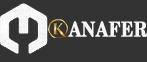
<style>
.page{position:relative;width:147px;height:62px;background:#333333}
.page>*{position:absolute;margin:0}
.t1{font:20.8px "CenturySchlbkCyrillicBT-Bold";color:#f6f6f6;font-weight:bold;scale:0.79 1}
</style>
<div class="page">
<p class="t1" style="left:68px;top:21px;width:80px;height:16px">ANAFER</p>
</div>
